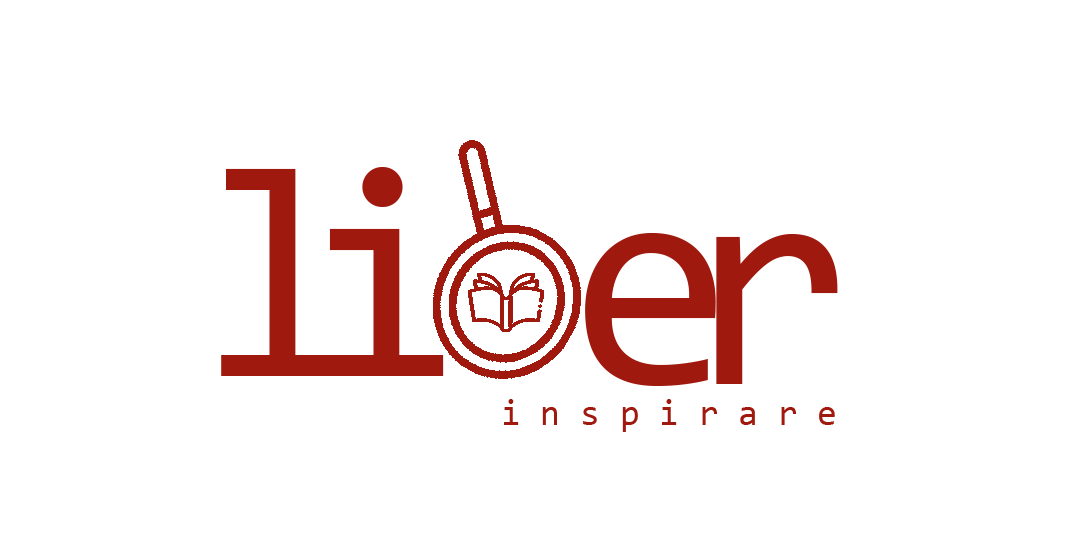
<style>
.page{position:relative;width:1080px;height:540px;background:#ffffff}
.page>*{position:absolute;margin:0}
.t1{font:300px "Consolas";color:#a0190e}
.t2{font:36px "Consolas";color:#a0190e}
</style>
<div class="page">
<p class="t1" style="left:221px;top:168px;width:119px;height:208px">l</p>
<p class="t1" style="left:325px;top:166px;width:119px;height:210px">i</p>
<p class="t1" style="left:585px;top:232px;width:131px;height:154px">e</p>
<p class="t1" style="left:716px;top:233px;width:122px;height:151px">r</p>
<p class="t2" style="left:504px;top:399px;width:331px;height:33px">i n s p i r a r e</p>
</div>
